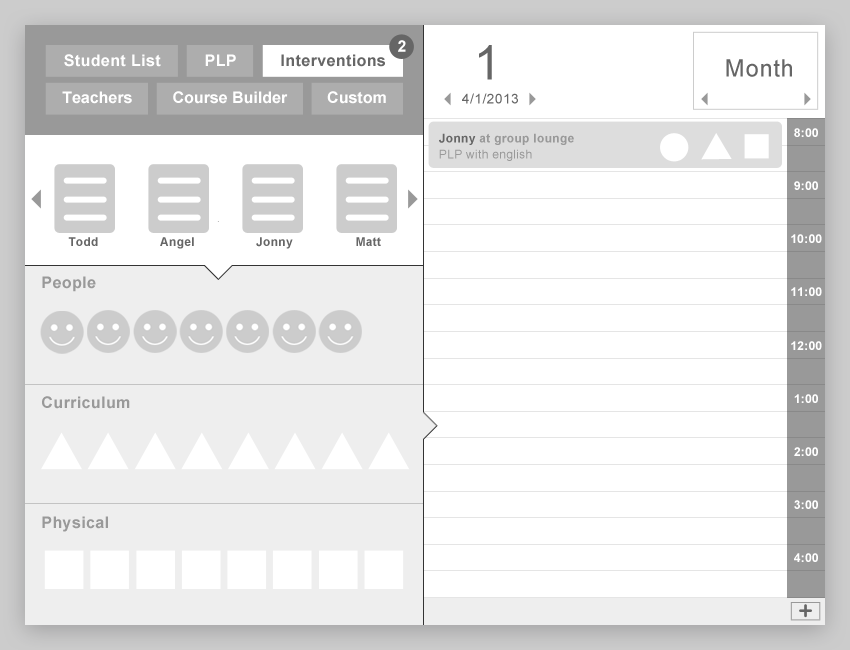
<style>
.page{position:relative;width:850px;height:650px;background:#ffffff}
.page>*{position:absolute;margin:0}
.t1{font:16px "Arial-BoldMT";letter-spacing:0.025em;color:#ffffff}
.t2{font:48px "ArialMT";letter-spacing:0.025em;color:#666666}
.t3{font:24px "ArialMT";letter-spacing:0.025em;color:#666666}
.t4{font:14px "ArialMT";letter-spacing:0.025em;color:#666666}
.t5{font:12px/16px "ArialMT";letter-spacing:0.025em;color:#999999}
.t6{font:12px/16px "Arial-BoldMT";letter-spacing:0.025em;color:#666666}
.t7{font:12px/16px "Arial-BoldMT";letter-spacing:0.025em;color:#999999}
.t8{font:12px "Arial-BoldMT";letter-spacing:0.025em;color:#ffffff}
.t9{font:12px "Arial-BoldMT";letter-spacing:0.025em;color:#666666}
.t10{font:16px "Arial-BoldMT";letter-spacing:0.025em;color:#999999}
</style>
<div class="page">
<p class="t1" style="left:398px;top:40px;width:8px;height:12px">2</p>
<p class="t2" style="left:479px;top:45px;width:13px;height:35px">1</p>
<p class="t3" style="left:726px;top:59px;width:66px;height:18px">Month</p>
<p class="t4" style="left:462px;top:93px;width:56px;height:11px">4/1/2013</p>
<p class="t5" style="left:439px;top:133px;width:135px;height:28px"><span class="t6">Jonny </span><span class="t7">at group lounge<br></span>PLP with english</p>
<p class="t8" style="left:794px;top:128px;width:24px;height:9px">8:00</p>
<p class="t8" style="left:794px;top:181px;width:24px;height:9px">9:00</p>
<p class="t9" style="left:68px;top:237px;width:30px;height:9px">Todd</p>
<p class="t9" style="left:160px;top:237px;width:34px;height:12px">Angel</p>
<p class="t9" style="left:256px;top:237px;width:37px;height:12px">Jonny</p>
<p class="t9" style="left:356px;top:237px;width:25px;height:9px">Matt</p>
<p class="t8" style="left:791px;top:234px;width:31px;height:9px">10:00</p>
<p class="t10" style="left:42px;top:276px;width:54px;height:16px">People</p>
<p class="t8" style="left:791px;top:287px;width:31px;height:9px">11:00</p>
<p class="t8" style="left:791px;top:341px;width:31px;height:9px">12:00</p>
<p class="t10" style="left:42px;top:396px;width:88px;height:13px">Curriculum</p>
<p class="t8" style="left:794px;top:394px;width:24px;height:9px">1:00</p>
<p class="t8" style="left:794px;top:447px;width:24px;height:9px">2:00</p>
<p class="t8" style="left:794px;top:500px;width:24px;height:9px">3:00</p>
<p class="t10" style="left:42px;top:516px;width:66px;height:16px">Physical</p>
<p class="t8" style="left:794px;top:553px;width:24px;height:9px">4:00</p>
</div>
